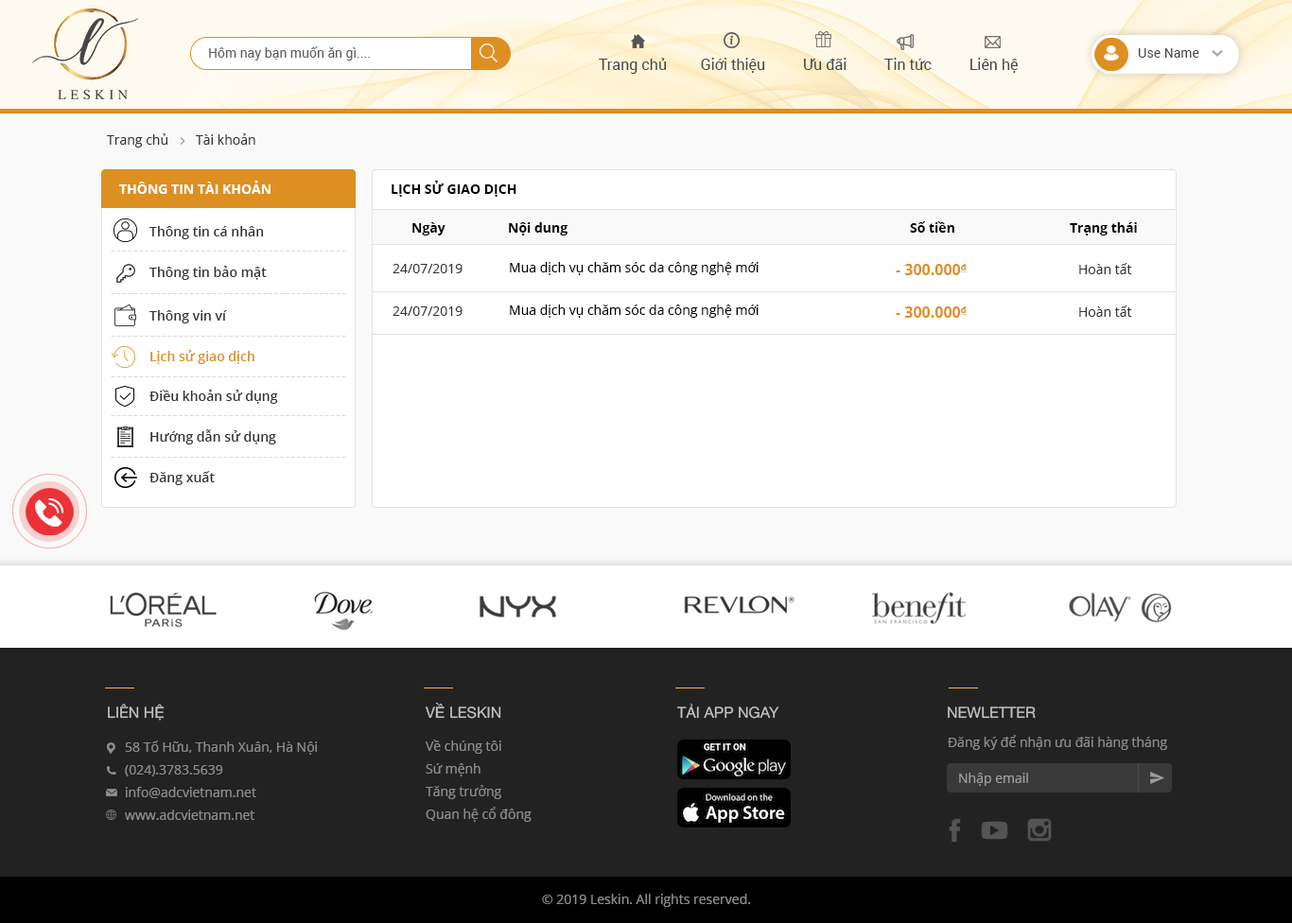
<style>
.page{position:relative;width:1292px;height:923px;background:#ffffff}
.page>*{position:absolute;margin:0}
.t1{font:13.2px "Roboto-Regular";color:#595959}
.t2{font:13.2px "Roboto-Regular";color:#464646}
.t3{font:15.1px "Roboto-Regular";color:#464646}
.t4{font:13.2px "OpenSans";color:#333333}
.t5{font:13.2px "OpenSans-Bold";color:#ffffff;text-transform:uppercase}
.t6{font:13.2px "OpenSans-Bold";color:#000000;text-transform:uppercase}
.t7{font:13.2px "OpenSans-Bold";color:#000000}
.t8{font:13.2px "OpenSans-Semibold";color:#333333}
.t9{font:15.1px "OpenSans-Light";letter-spacing:0.05em;color:#d9d9d9}
.t10{font:13.2px "OpenSans";color:#000000}
.t11{font:15.1px "OpenSans-Bold";color:#de8f21}
.t12{font:15.1px "OpenSans-Bold";color:#de8f21;text-decoration:underline}
.t13{font:13.2px "OpenSans-Semibold";color:#dd8f22}
.t14{font:15.1px "HelveticaNeue";color:#c4c4c4;text-transform:uppercase}
.t15{font:13.2px "OpenSans";color:#8c8c8c}
.t16{font:13.2px/22.7px "OpenSans";color:#8c8c8c}
.t17{font:13.2px "OpenSans";color:#9c9c9c}
</style>
<div class="page">
<p class="t1" style="left:209px;top:46px;width:161px;height:15px">Hôm nay bạn muốn ăn gì....</p>
<p class="t2" style="left:1138px;top:48px;width:61px;height:10px">Use Name</p>
<p class="t3" style="left:599px;top:58px;width:419px;height:16px">Trang chủ         Giới thiệu          Ưu đãi          Tin tức          Liên hệ</p>
<p class="t4" style="left:107px;top:133px;width:148px;height:15px">Trang chủ        Tài khoản</p>
<p class="t5" style="left:119px;top:181px;width:151px;height:13px">Thông tin tài khoản</p>
<p class="t6" style="left:392px;top:181px;width:124px;height:16px">Lịch sử giao dịch</p>
<p class="t7" style="left:910px;top:221px;width:44px;height:12px">Số tiền</p>
<p class="t8" style="left:149px;top:226px;width:115px;height:13px">Thông tin cá nhân</p>
<p class="t7" style="left:412px;top:222px;width:33px;height:13px">Ngày</p>
<p class="t7" style="left:509px;top:222px;width:59px;height:13px">Nội dung</p>
<p class="t7" style="left:1070px;top:222px;width:67px;height:13px">Trạng thái</p>
<p class="t9" style="left:111px;top:251px;width:235px;height:1px">------------------------------------------</p>
<p class="t8" style="left:149px;top:266px;width:118px;height:14px">Thông tin bảo mật</p>
<p class="t4" style="left:392px;top:264px;width:70px;height:9px">24/07/2019</p>
<p class="t10" style="left:510px;top:262px;width:248px;height:13px">Mua dịch vụ chăm sóc da công nghệ mới</p>
<p class="t11" style="left:896px;top:264px;width:71px;height:11px">- 300.000<span class="t12">đ</span></p>
<p class="t4" style="left:1079px;top:263px;width:53px;height:11px">Hoàn tất</p>
<p class="t9" style="left:111px;top:293px;width:235px;height:1px">------------------------------------------</p>
<p class="t10" style="left:510px;top:305px;width:248px;height:13px">Mua dịch vụ chăm sóc da công nghệ mới</p>
<p class="t4" style="left:1079px;top:305px;width:53px;height:12px">Hoàn tất</p>
<p class="t8" style="left:149px;top:310px;width:78px;height:13px">Thông vin ví</p>
<p class="t4" style="left:392px;top:306px;width:70px;height:10px">24/07/2019</p>
<p class="t11" style="left:896px;top:306px;width:71px;height:12px">- 300.000<span class="t12">đ</span></p>
<p class="t9" style="left:111px;top:336px;width:235px;height:1px">------------------------------------------</p>
<p class="t13" style="left:150px;top:350px;width:104px;height:14px">Lịch sử giao dịch</p>
<p class="t9" style="left:111px;top:376px;width:235px;height:1px">------------------------------------------</p>
<p class="t8" style="left:149px;top:390px;width:129px;height:14px">Điều khoản sử dụng</p>
<p class="t9" style="left:111px;top:415px;width:235px;height:1px">------------------------------------------</p>
<p class="t8" style="left:150px;top:429px;width:126px;height:15px">Hướng dẫn sử dụng</p>
<p class="t9" style="left:111px;top:457px;width:235px;height:1px">------------------------------------------</p>
<p class="t8" style="left:149px;top:471px;width:66px;height:14px">Đăng xuất</p>
<p class="t14" style="left:426px;top:702px;width:75px;height:17px">về leskin</p>
<p class="t14" style="left:108px;top:704px;width:57px;height:17px">Liên hệ</p>
<p class="t14" style="left:677px;top:704px;width:102px;height:15px">Tải App ngay</p>
<p class="t14" style="left:948px;top:706px;width:88px;height:13px">newletter</p>
<p class="t15" style="left:948px;top:735px;width:219px;height:15px">Đăng ký để nhận ưu đãi hàng tháng</p>
<p class="t16" style="left:125px;top:741px;width:192px;height:79px">58 Tố Hữu, Thanh Xuân, Hà Nội<br>(024).3783.5639<br>info@adcvietnam.net <br>www.adcvietnam.net</p>
<p class="t16" style="left:426px;top:740px;width:105px;height:82px">Về chúng tôi<br>Sứ mệnh<br>Tăng trưởng<br>Quan hệ cổ đông</p>
<p class="t17" style="left:959px;top:773px;width:69px;height:13px">Nhập email</p>
<p class="t15" style="left:542px;top:894px;width:208px;height:13px">© 2019 Leskin. All rights reserved.</p>
</div>
